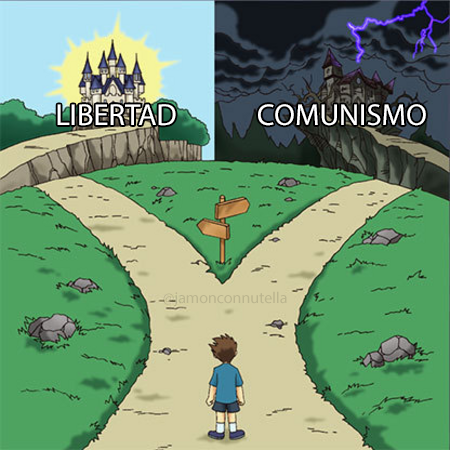
<style>
.page{position:relative;width:450px;height:450px}
.page>*{position:absolute;margin:0}
.t1{font:30.4px "MyriadPro-Regular";color:#ffffff}
.t2{font:15.9px "MyriadPro-Regular";color:#bbb58e}
</style>
<div class="page">
<p class="t1" style="left:57px;top:104px;width:119px;height:22px">LIBERTAD</p>
<p class="t1" style="left:258px;top:104px;width:168px;height:22px">COMUNISMO</p>
<p class="t2" style="left:163px;top:291px;width:124px;height:16px">@jamonconnutella</p>
</div>
